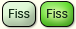
<style>
.page{position:relative;width:76px;height:29px}
.page>*{position:absolute;margin:0}
.t1{font:12px "Geneva";color:#152d19}
</style>
<div class="page">
<p class="t1" style="left:9px;top:9px;width:21px;height:9px">Fiss</p>
<p class="t1" style="left:47px;top:9px;width:21px;height:9px">Fiss</p>
</div>
